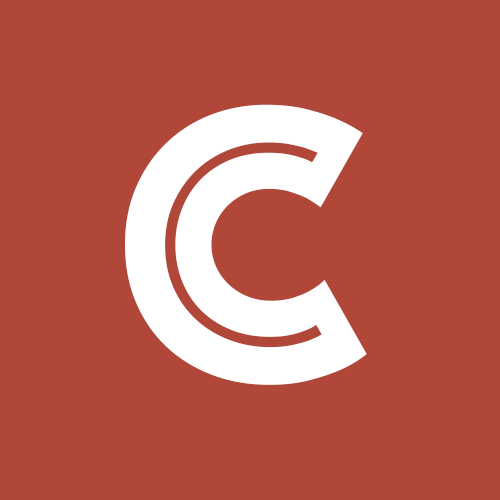
<style>
.page{position:relative;width:500px;height:500px;background:#b04738}
.page>*{position:absolute;margin:0}
.t1{font:400px "Phosphate-Inline";color:#ffffff}
</style>
<div class="page">
<p class="t1" style="left:125px;top:104px;width:242px;height:281px">C</p>
</div>
